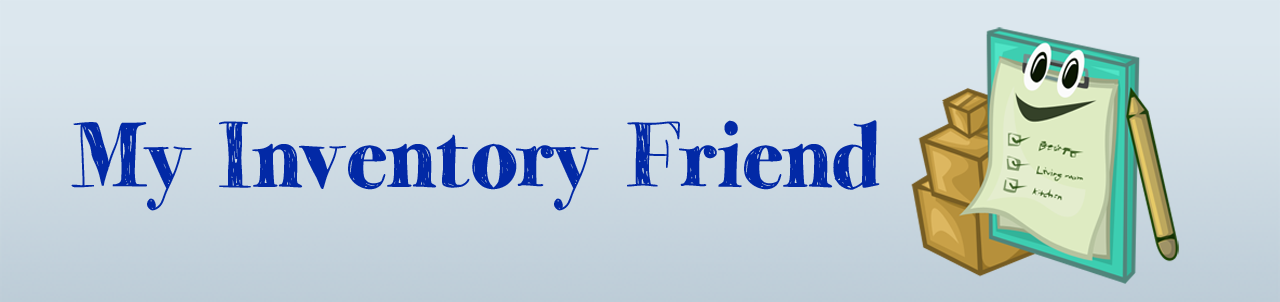
<style>
.page{position:relative;width:1280px;height:302px}
.page>*{position:absolute;margin:0}
.t1{font:94.4px "MomsDiner";color:#0229a6}
</style>
<div class="page">
<p class="t1" style="left:71px;top:120px;width:809px;height:91px">My Inventory Friend</p>
</div>
